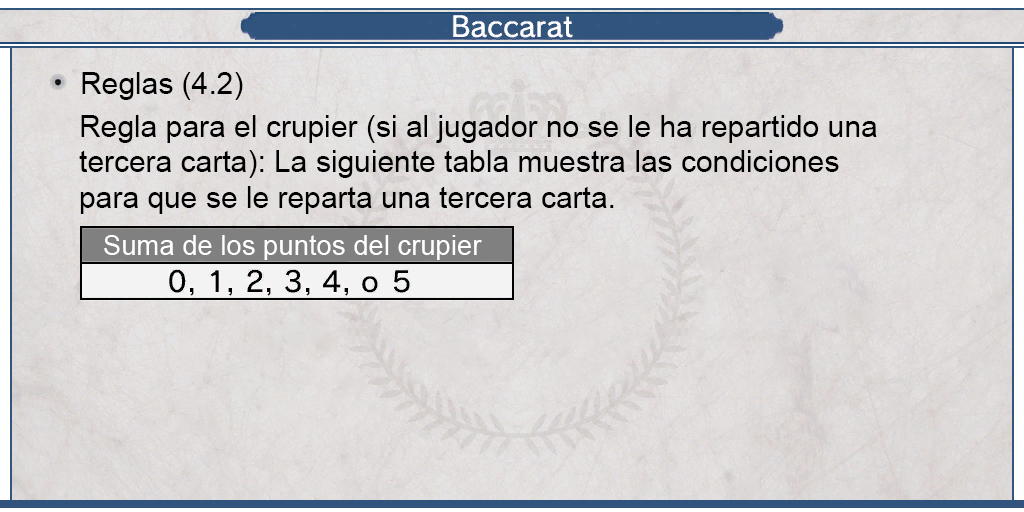
<style>
.page{position:relative;width:1024px;height:512px}
.page>*{position:absolute;margin:0}
.t1{font:29.9px "ArialMT";color:#000000}
.t2{font:27.3px "ArialMT";color:#ffffff}
</style>
<div class="page">
<p class="t1" style="left:82px;top:72px;width:161px;height:28px">Reglas (4.2)</p>
<p class="t1" style="left:79px;top:115px;width:798px;height:99px;text-align:justify">Regla para el crupier (si al jugador no se le ha repartido una <br>tercera carta): La siguiente tabla muestra las condiciones <br>para que se le reparta una tercera carta.</p>
<p class="t2" style="left:104px;top:235px;width:378px;height:25px">Suma de los puntos del crupier</p>
</div>
